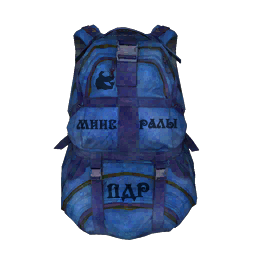
<style>
.page{position:relative;width:256px;height:256px;background:#ffffff}
.page>*{position:absolute;margin:0}
.t1{font:14.1px "NK123";letter-spacing:-0.04em;color:#0c1b35;font-weight:bold}
.t2{font:14.1px "NK123";letter-spacing:-0.04em;color:#121f38;font-weight:bold}
.t3{font:21.3px "NK123";letter-spacing:-0.04em;color:#06152e;font-weight:bold}
.t4{font:20.8px "NK123";letter-spacing:-0.04em;font-weight:bold}
</style>
<div class="page">
<p class="t1" style="left:76px;top:119px;width:41px;height:11px">МИНЕ</p>
<p class="t2" style="left:139px;top:118px;width:39px;height:12px">РАЛЫ</p>
<p class="t3" style="left:107px;top:182px;width:43px;height:20px;rotate:-1deg">ПДР</p>
<p class="t4" style="left:108px;top:184px;width:42px;height:19px;rotate:-1deg">ПДР</p>
</div>
